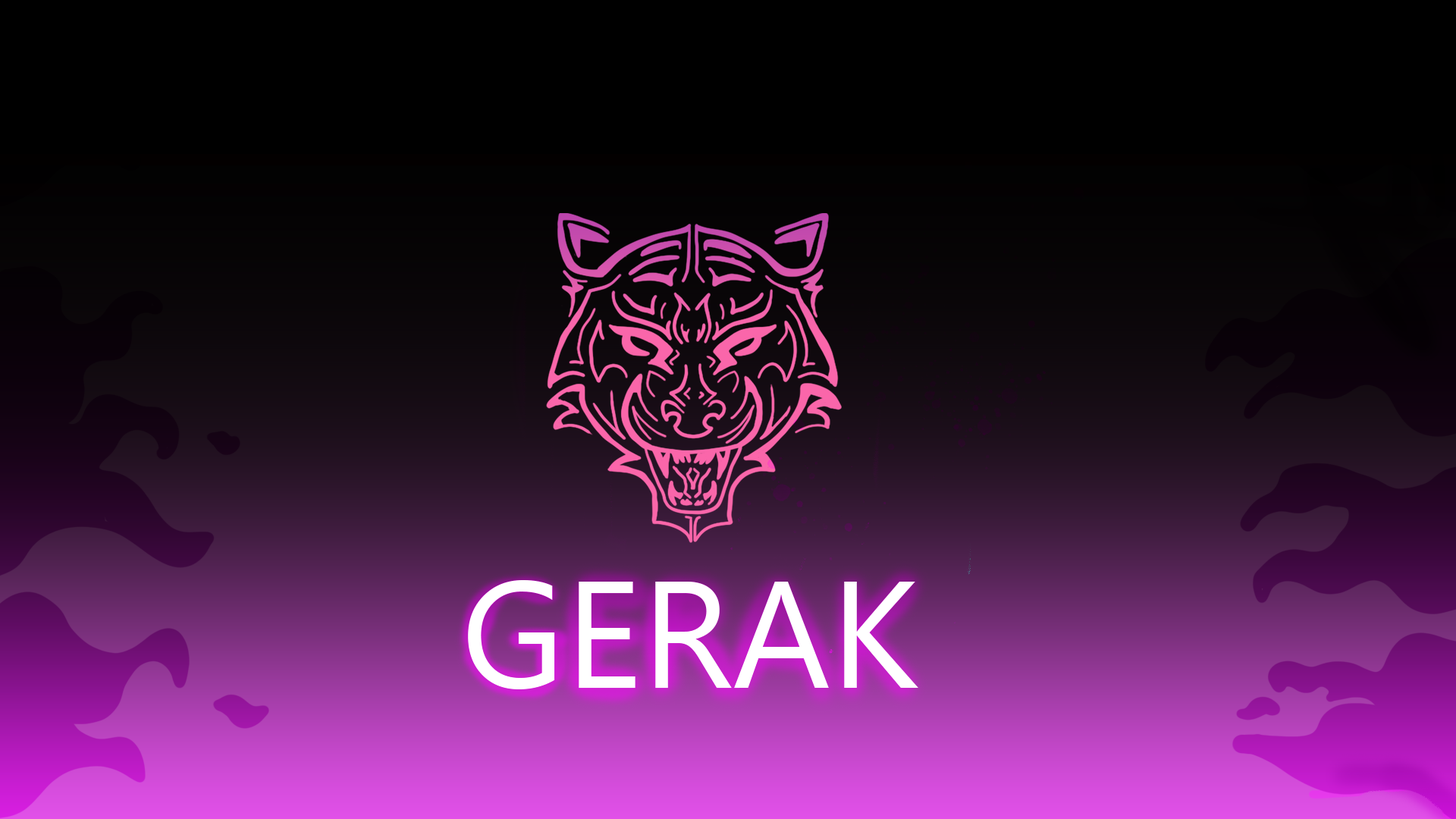
<style>
.page{position:relative;width:1456px;height:819px}
.page>*{position:absolute;margin:0}
.t1{font:151.7px "Gadugi";color:#ffffff}
</style>
<div class="page">
<p class="t1" style="left:468px;top:580px;width:450px;height:109px">GERAK</p>
</div>
